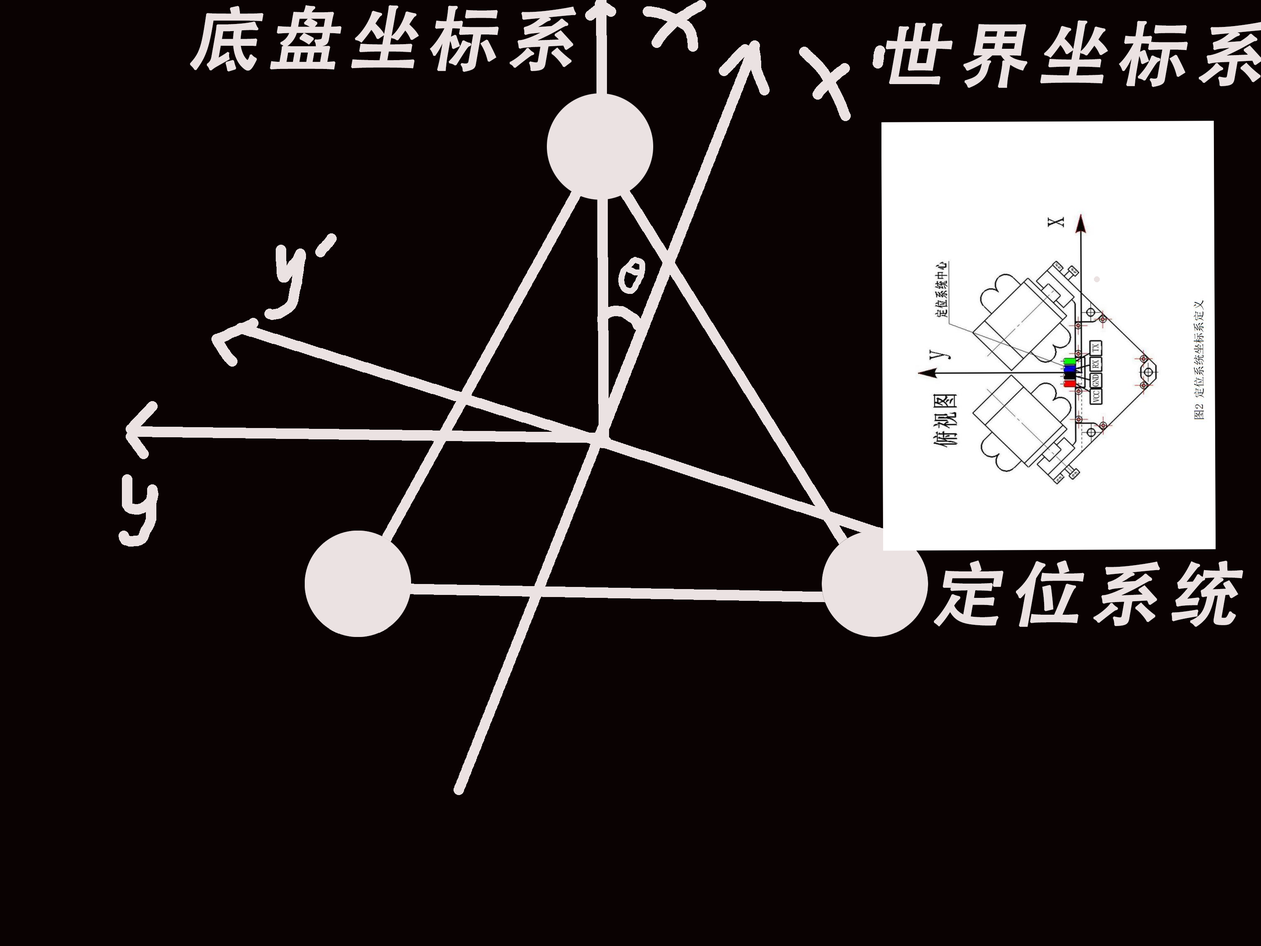
<style>
.page{position:relative;width:1261px;height:946px;background:#0a0202}
.page>*{position:absolute;margin:0}
.t1{font:70.1px "AdobeHeitiStd-Regular";letter-spacing:0.1em;color:#ebe2e2;font-weight:bold;font-style:italic}
</style>
<div class="page">
<p class="t1" style="left:190px;top:5px;width:386px;height:67px">底盘坐标系</p>
<p class="t1" style="left:933px;top:560px;width:310px;height:67px">定位系统</p>
</div>
